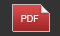
<style>
.page{position:relative;width:60px;height:36px;background:#333333}
.page>*{position:absolute;margin:0}
.t1{font:9px "ArialMT";color:#ffffff}
</style>
<div class="page">
<p class="t1" style="left:21px;top:15px;width:18px;height:7px">PDF</p>
</div>
